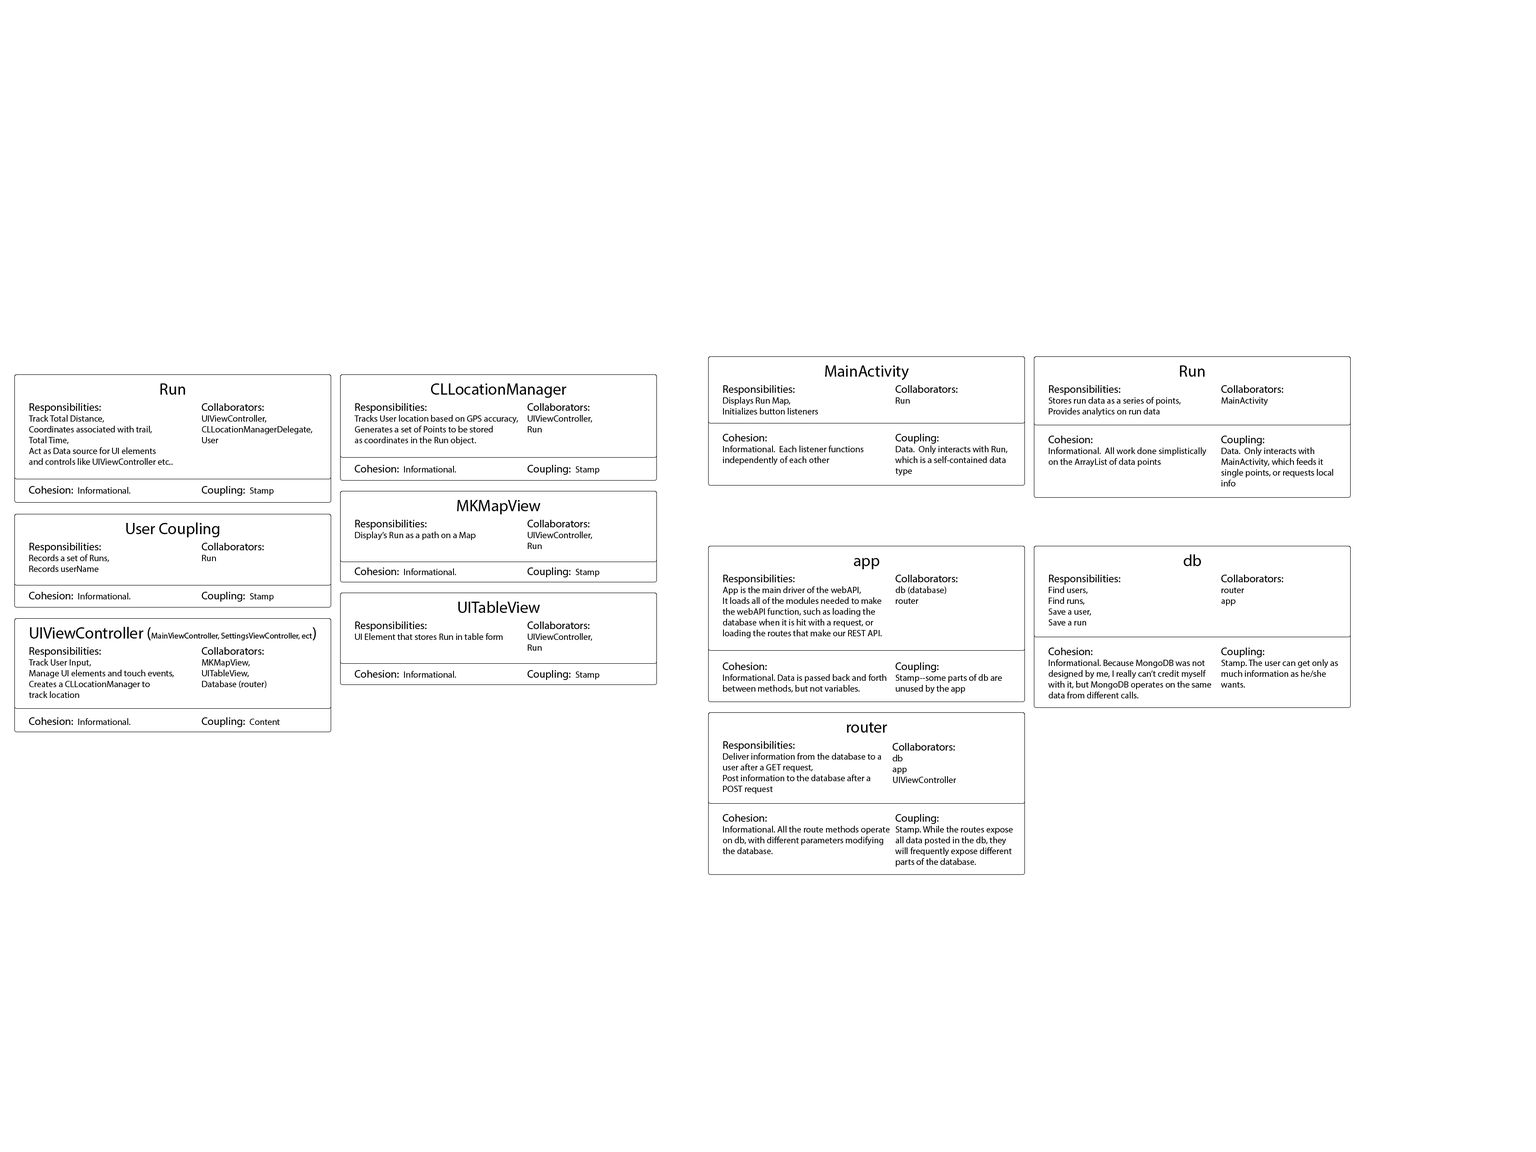
<style>
.page{position:relative;width:1536px;height:1152px;background:#ffffff}
.page>*{position:absolute;margin:0}
.t1{font:16.2px "MyriadPro-Regular";color:#010101}
.t2{font:9px "MyriadPro-Regular";color:#020202}
.t3{font:10.8px "MyriadPro-Regular";color:#020202}
.t4{font:10.8px "MyriadPro-Regular";color:#000000}
.t5{font:9px "MyriadPro-Regular";color:#000000}
.t6{font:8.1px "MyriadPro-Regular";color:#010101}
</style>
<div class="page">
<p class="t1" style="left:825px;top:365px;width:84px;height:15px">MainActivity</p>
<p class="t1" style="left:1180px;top:365px;width:25px;height:12px">Run</p>
<p class="t1" style="left:160px;top:383px;width:25px;height:12px">Run</p>
<p class="t1" style="left:431px;top:383px;width:136px;height:15px">CLLocationManager</p>
<p class="t2" style="left:723px;top:385px;width:95px;height:29px"><span class="t3">Responsibilities:<br></span>Displays Run Map,<br>Initializes button listeners</p>
<p class="t4" style="left:896px;top:385px;width:62px;height:19px">Collaborators:<br><span class="t5">Run</span></p>
<p class="t2" style="left:1049px;top:385px;width:132px;height:31px"><span class="t3">Responsibilities:<br></span>Stores run data as a series of points,<br>Provides analytics on run data</p>
<p class="t4" style="left:1221px;top:385px;width:63px;height:20px">Collaborators:<br><span class="t5">MainActivity</span></p>
<p class="t2" style="left:29px;top:403px;width:144px;height:62px"><span class="t3">Responsibilities:<br></span>Track Total Distance,<br>Coordinates associated with trail,<br>Total Time, <br>Act as Data source for UI elements <br>and controls like UIViewController etc..</p>
<p class="t5" style="left:202px;top:403px;width:110px;height:40px"><span class="t4">Collaborators:<br></span>UIViewController, <br>CLLocationManagerDelegate,<br>User</p>
<p class="t2" style="left:355px;top:403px;width:163px;height:42px"><span class="t3">Responsibilities:<br></span>Tracks User location based on GPS accuracy,<br>Generates a set of Points to be stored <br>as coordinates in the Run object.</p>
<p class="t5" style="left:527px;top:403px;width:65px;height:29px"><span class="t4">Collaborators:<br></span>UIViewController,<br>Run</p>
<p class="t2" style="left:723px;top:434px;width:141px;height:31px"><span class="t3">Cohesion:<br></span>Informational.  Each listener functions <br>independently of each other</p>
<p class="t5" style="left:896px;top:434px;width:112px;height:42px"><span class="t4">Coupling:<br></span>Data.  Only interacts with Run, which is a self-contained data type</p>
<p class="t2" style="left:1048px;top:436px;width:158px;height:31px"><span class="t3">Cohesion:<br></span>Informational.  All work done simplistically on the ArrayList of data points</p>
<p class="t5" style="left:1221px;top:436px;width:112px;height:50px"><span class="t4">Coupling:<br></span>Data.  Only interacts with <br>MainActivity, which feeds it single points, or requests local info</p>
<p class="t2" style="left:355px;top:465px;width:101px;height:7px"><span class="t3">Cohesion:  </span>Informational.</p>
<p class="t4" style="left:527px;top:465px;width:72px;height:10px">Coupling:  <span class="t5">Stamp</span></p>
<p class="t2" style="left:29px;top:486px;width:101px;height:8px"><span class="t3">Cohesion:  </span>Informational.</p>
<p class="t4" style="left:202px;top:486px;width:72px;height:10px">Coupling:  <span class="t5">Stamp</span></p>
<p class="t1" style="left:457px;top:500px;width:83px;height:14px">MKMapView</p>
<p class="t2" style="left:355px;top:520px;width:121px;height:20px"><span class="t3">Responsibilities:<br></span>Display’s Run as a path on a Map</p>
<p class="t5" style="left:527px;top:520px;width:65px;height:29px"><span class="t4">Collaborators:<br></span>UIViewController,<br>Run</p>
<p class="t1" style="left:126px;top:522px;width:94px;height:15px">User Coupling</p>
<p class="t2" style="left:29px;top:543px;width:80px;height:29px"><span class="t3">Responsibilities:<br></span>Records a set of Runs,<br>Records userName</p>
<p class="t4" style="left:202px;top:543px;width:62px;height:18px">Collaborators:<br><span class="t5">Run</span></p>
<p class="t1" style="left:854px;top:558px;width:26px;height:11px">app</p>
<p class="t1" style="left:1184px;top:554px;width:18px;height:12px">db</p>
<p class="t2" style="left:355px;top:567px;width:101px;height:8px"><span class="t3">Cohesion:  </span>Informational.</p>
<p class="t4" style="left:527px;top:567px;width:72px;height:10px">Coupling:  <span class="t5">Stamp</span></p>
<p class="t2" style="left:723px;top:575px;width:159px;height:63px"><span class="t3">Responsibilities:<br></span>App is the main driver of the webAPI,<br>It loads all of the modules needed to make the webAPI function, such as loading the <br>database when it is hit with a request, or <br>loading the routes that make our REST API.</p>
<p class="t5" style="left:896px;top:575px;width:62px;height:29px"><span class="t4">Collaborators:<br></span>db (database)<br>router</p>
<p class="t2" style="left:1049px;top:575px;width:71px;height:51px"><span class="t3">Responsibilities:<br></span>Find users,<br>Find runs,<br>Save a user,<br>Save a run</p>
<p class="t4" style="left:1221px;top:575px;width:63px;height:31px">Collaborators:<br><span class="t5">router<br>app</span></p>
<p class="t2" style="left:29px;top:592px;width:101px;height:7px"><span class="t3">Cohesion:  </span>Informational.</p>
<p class="t4" style="left:202px;top:592px;width:72px;height:10px">Coupling:  <span class="t5">Stamp</span></p>
<p class="t1" style="left:458px;top:601px;width:82px;height:12px">UITableView</p>
<p class="t6" style="left:30px;top:627px;width:286px;height:13px"><span class="t1">UIViewController (</span>MainViewController, SettingsViewController, ect<span class="t1">)</span></p>
<p class="t2" style="left:355px;top:621px;width:148px;height:19px"><span class="t3">Responsibilities:<br></span>UI Element that stores Run in table form</p>
<p class="t5" style="left:527px;top:621px;width:65px;height:30px"><span class="t4">Collaborators:<br></span>UIViewController,<br>Run</p>
<p class="t2" style="left:29px;top:647px;width:145px;height:51px"><span class="t3">Responsibilities:<br></span>Track User Input, <br>Manage UI elements and touch events,<br>Creates a CLLocationManager to <br>track location</p>
<p class="t5" style="left:202px;top:647px;width:64px;height:41px"><span class="t4">Collaborators:<br></span>MKMapView,<br>UITableView,<br>Database (router)</p>
<p class="t2" style="left:1048px;top:648px;width:163px;height:50px"><span class="t3">Cohesion:<br></span>Informational. Because MongoDB was not designed by me, I really can’t credit myself with it, but MongoDB operates on the same data from different calls.</p>
<p class="t5" style="left:1221px;top:648px;width:117px;height:40px"><span class="t4">Coupling:<br></span>Stamp. The user can get only as much information as he/she wants.</p>
<p class="t2" style="left:723px;top:662px;width:163px;height:31px"><span class="t3">Cohesion:<br></span>Informational. Data is passed back and forth between methods, but not variables.</p>
<p class="t5" style="left:896px;top:662px;width:106px;height:31px"><span class="t4">Coupling:<br></span>Stamp--some parts of db are <br>unused by the app</p>
<p class="t2" style="left:355px;top:670px;width:101px;height:8px"><span class="t3">Cohesion:  </span>Informational.</p>
<p class="t4" style="left:527px;top:670px;width:72px;height:10px">Coupling:  <span class="t5">Stamp</span></p>
<p class="t2" style="left:29px;top:717px;width:101px;height:8px"><span class="t3">Cohesion:  </span>Informational.</p>
<p class="t4" style="left:202px;top:717px;width:78px;height:10px">Coupling:  <span class="t5">Content</span></p>
<p class="t1" style="left:847px;top:722px;width:40px;height:11px">router</p>
<p class="t2" style="left:723px;top:741px;width:159px;height:53px"><span class="t3">Responsibilities:<br></span>Deliver information from the database to a user after a GET request,<br>Post information to the database after a <br>POST request</p>
<p class="t5" style="left:893px;top:743px;width:63px;height:40px"><span class="t4">Collaborators:<br></span>db<br>app<br>UIViewController</p>
<p class="t2" style="left:723px;top:814px;width:167px;height:40px"><span class="t3">Cohesion:<br></span>Informational. All the route methods operate on db, with different parameters modifying the database.</p>
<p class="t5" style="left:896px;top:814px;width:117px;height:53px"><span class="t4">Coupling:<br></span>Stamp. While the routes expose all data posted in the db, they will frequently expose different parts of the database.</p>
</div>
